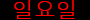
<style>
.page{position:relative;width:90px;height:20px;background:#000000}
.page>*{position:absolute;margin:0}
.t1{font:22.4px "Dotum";color:#ff0000}
</style>
<div class="page">
<p class="t1" style="left:14px;top:0px;width:61px;height:19px">일요일</p>
</div>
